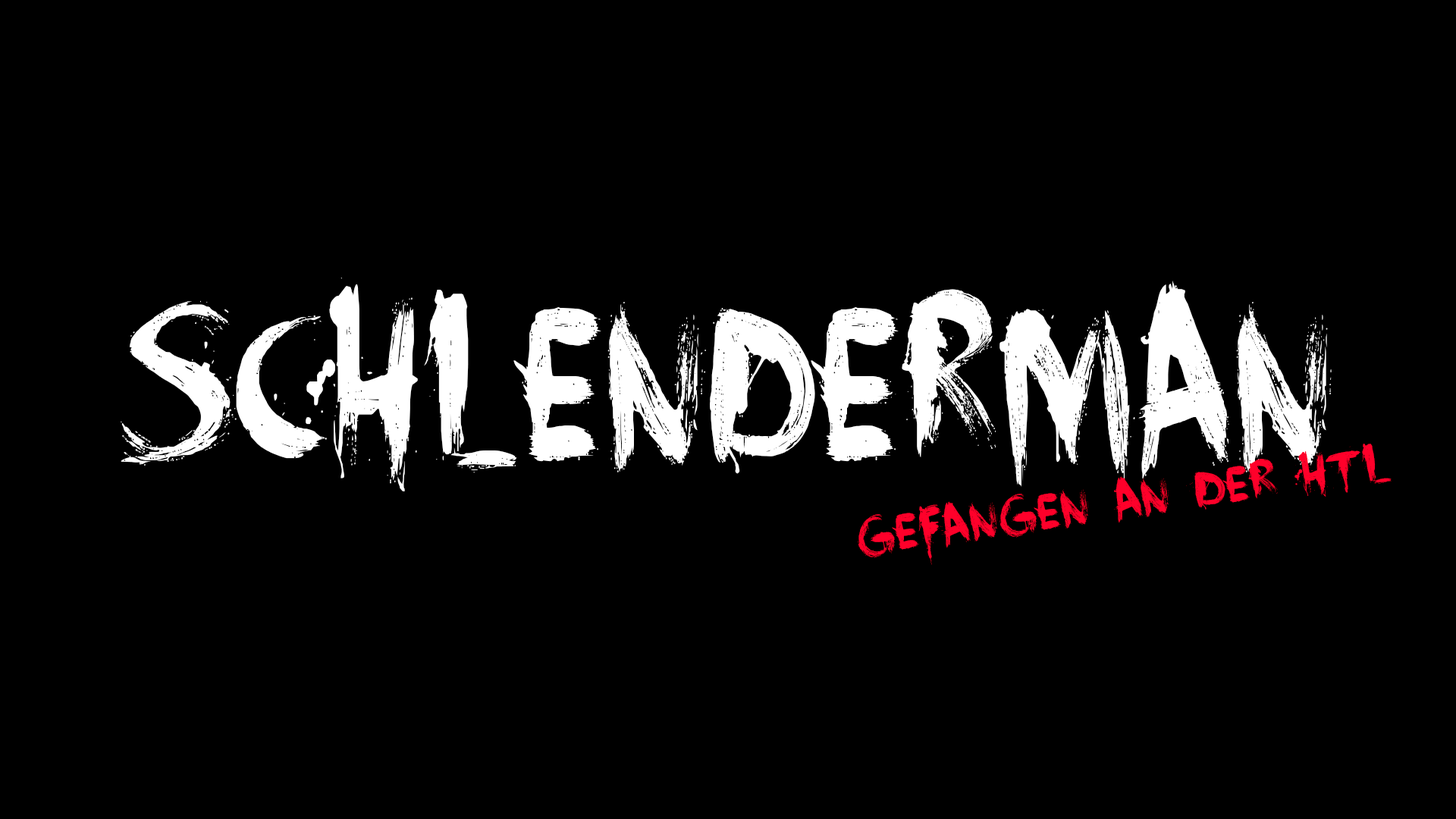
<style>
.page{position:relative;width:1456px;height:819px;background:#000000}
.page>*{position:absolute;margin:0}
.t1{font:237px "FaceYourFears";color:#ffffff;scale:0.81 1}
.t2{font:54.6px "FaceYourFears";color:#ff002a}
</style>
<div class="page">
<p class="t1" style="left:121px;top:278px;width:1211px;height:213px">Schlenderman</p>
<p class="t2" style="left:858px;top:444px;width:534px;height:121px;rotate:-8deg">Gefangen AN der htl</p>
</div>
